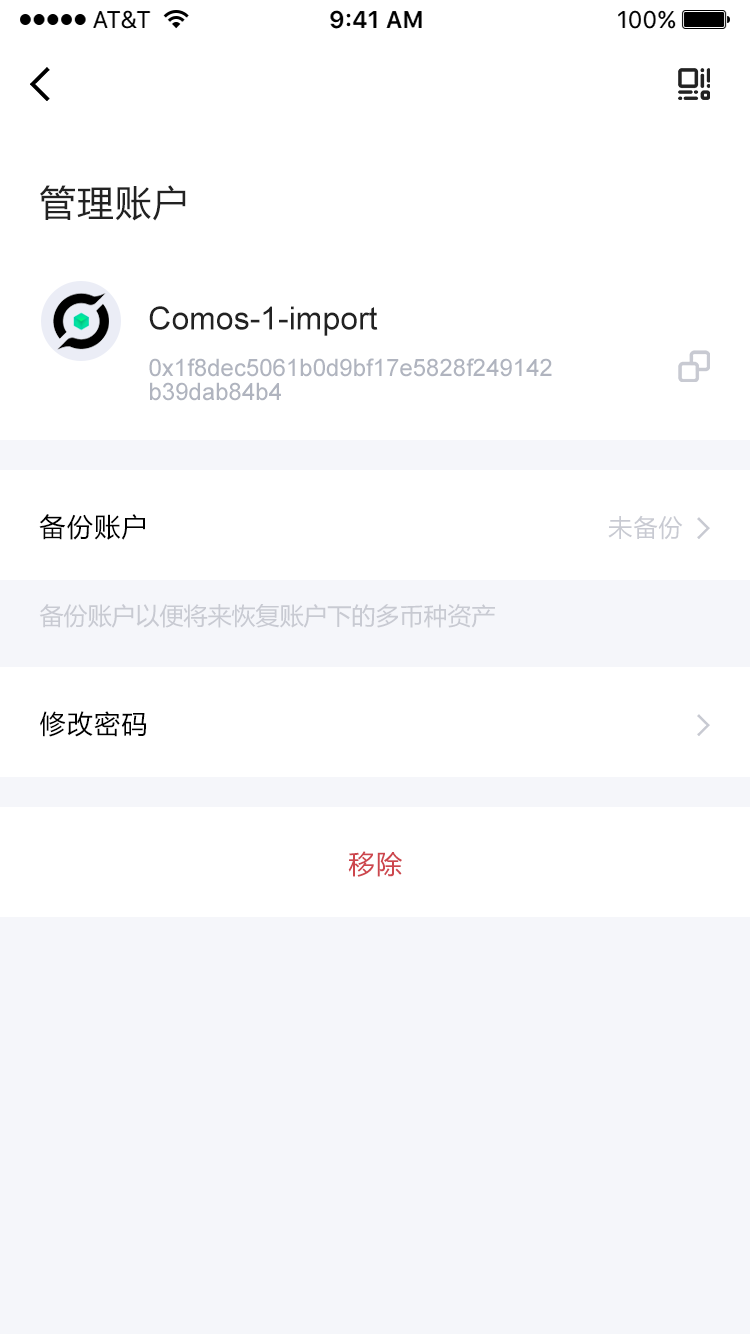
<style>
.page{position:relative;width:750px;height:1334px;background:#ffffff}
.page>*{position:absolute;margin:0}
.t1{font:36px "MicrosoftYaHei";letter-spacing:0.05em;color:#222222}
.t2{font:32px "ArialMT";color:#222222}
.t3{font:24px/24px "ArialMT";color:#b0b4bf}
.t4{font:26px "MicrosoftYaHei";letter-spacing:0.05em;color:#000000}
.t5{font:24px "MicrosoftYaHei";letter-spacing:0.05em;color:#c8cad2}
.t6{font:24px "MicrosoftYaHei";color:#c8cad2}
.t7{font:26px "MicrosoftYaHei";letter-spacing:0.05em;color:#cd464d}
</style>
<div class="page">
<p class="t1" style="left:40px;top:185px;width:146px;height:36px">管理账户</p>
<p class="t2" style="left:149px;top:306px;width:229px;height:30px">Comos-1-import</p>
<p class="t3" style="left:149px;top:358px;width:403px;height:43px">0x1f8dec5061b0d9bf17e5828f249142<br>b39dab84b4</p>
<p class="t4" style="left:39px;top:514px;width:106px;height:26px">备份账户</p>
<p class="t5" style="left:608px;top:515px;width:75px;height:25px">未备份</p>
<p class="t6" style="left:39px;top:604px;width:456px;height:24px">备份账户以便将来恢复账户下的多币种资产</p>
<p class="t4" style="left:40px;top:711px;width:107px;height:26px">修改密码</p>
<p class="t7" style="left:348px;top:851px;width:54px;height:26px">移除</p>
</div>
